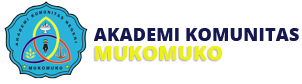
<style>
.page{position:relative;width:302px;height:84px;background:#ffffff}
.page>*{position:absolute;margin:0}
.t1{font:18.2px "OpenSans-Extrabold";color:#151750}
.t2{font:20.2px "OpenSans-Extrabold";color:#edf014}
</style>
<div class="page">
<p class="t1" style="left:93px;top:28px;width:206px;height:13px">AKADEMI KOMUNITAS</p>
<p class="t2" style="left:95px;top:46px;width:128px;height:14px">MUKOMUKO</p>
</div>
